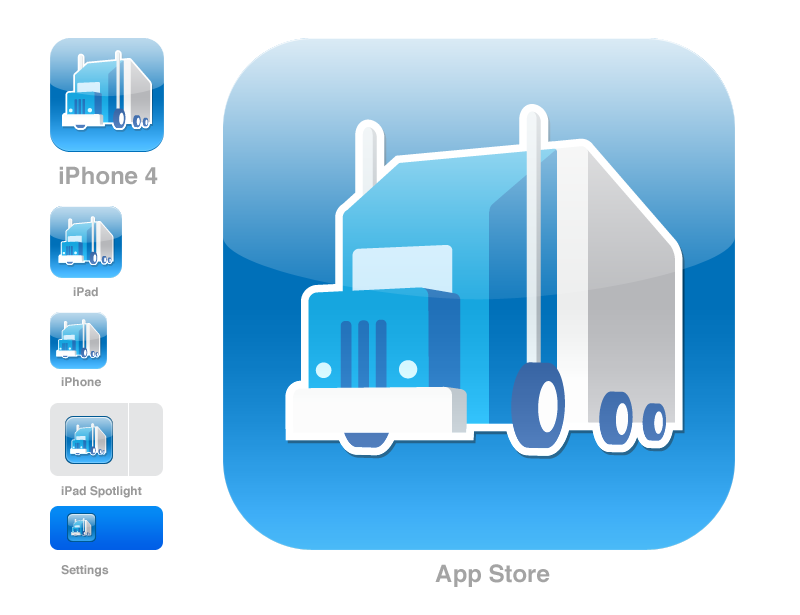
<style>
.page{position:relative;width:800px;height:615px;background:#ffffff}
.page>*{position:absolute;margin:0}
.t1{font:24px "Helvetica-Bold";color:#a4a4a4}
.t2{font:12px "Helvetica-Bold";color:#999999}
</style>
<div class="page">
<p class="t1" style="left:59px;top:166px;width:99px;height:19px">iPhone 4</p>
<p class="t2" style="left:73px;top:287px;width:25px;height:10px">iPad</p>
<p class="t2" style="left:61px;top:377px;width:40px;height:10px">iPhone</p>
<p class="t2" style="left:61px;top:486px;width:81px;height:12px">iPad Spotlight</p>
<p class="t2" style="left:61px;top:565px;width:48px;height:12px">Settings</p>
<p class="t1" style="left:435px;top:564px;width:115px;height:23px">App Store</p>
</div>
